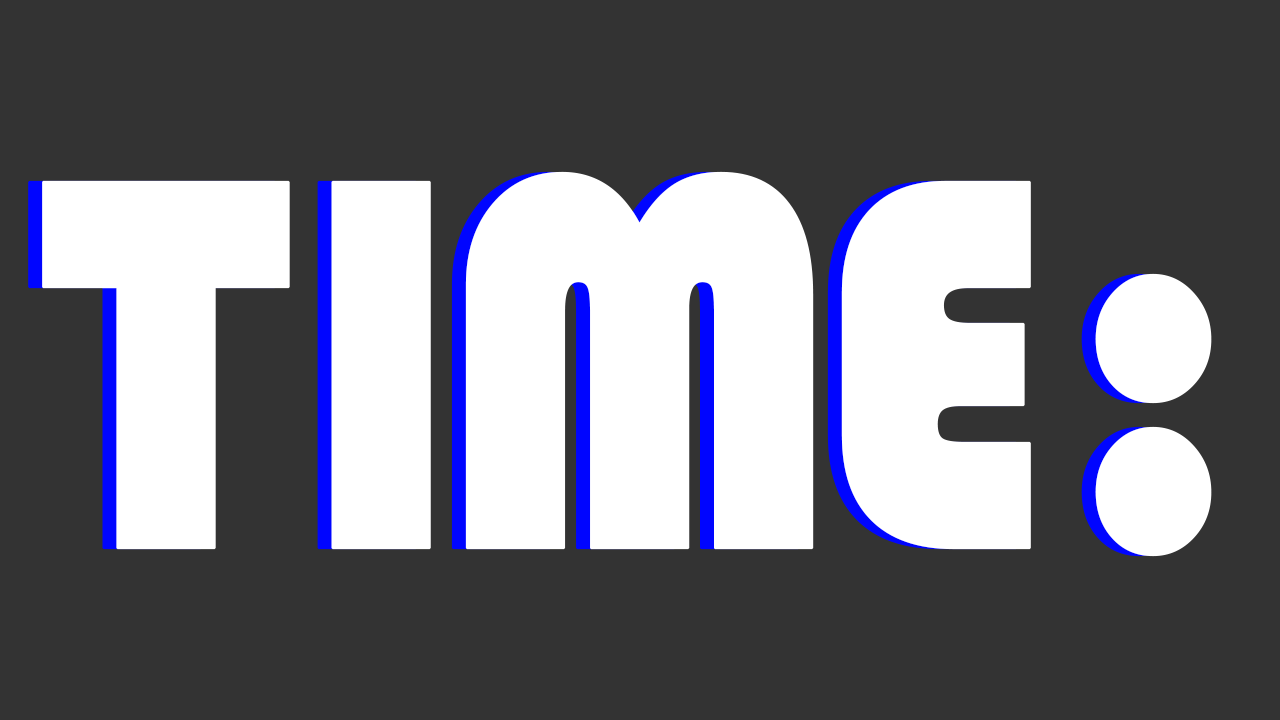
<style>
.page{position:relative;width:1280px;height:720px;background:#333333}
.page>*{position:absolute;margin:0}
.t1{font:131.9px "Bauhaus93";letter-spacing:-0.07em;color:#ffffff;font-weight:bold;scale:0.89 1}
</style>
<div class="page">
<p class="t1" style="left:42px;top:171px;width:1170px;height:386px;text-align:center">T IME :</p>
</div>
